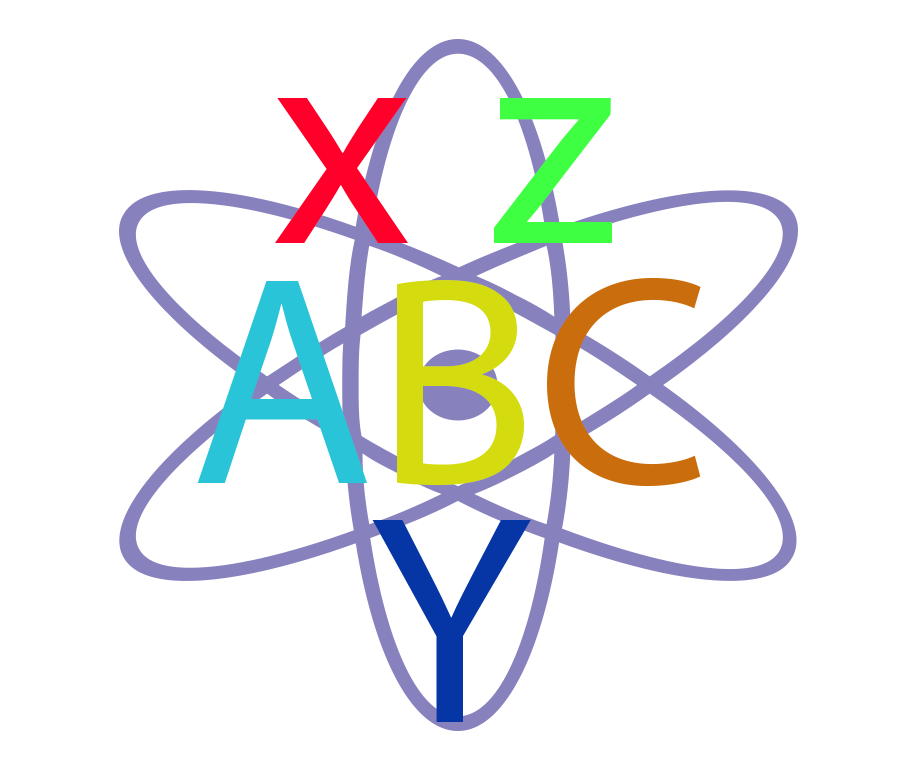
<style>
.page{position:relative;width:900px;height:768px;background:#ffffff}
.page>*{position:absolute;margin:0}
.t1{font:300px "MyriadPro-Regular";color:#ff002a}
.t2{font:300px "MyriadPro-Regular";color:#3eff41}
.t3{font:300px "MyriadPro-Regular";color:#29c4d8}
.t4{font:300px "MyriadPro-Regular";color:#d4db0e}
.t5{font:300px "MyriadPro-Regular";color:#ca6e0d}
.t6{font:300px "MyriadPro-Regular";color:#0636a5}
</style>
<div class="page">
<p class="t1" style="left:275px;top:98px;width:133px;height:145px">x</p>
<p class="t2" style="left:494px;top:98px;width:118px;height:145px">z</p>
<p class="t3" style="left:197px;top:277px;width:504px;height:210px">A<span class="t4">B</span><span class="t5">C</span></p>
<p class="t6" style="left:372px;top:520px;width:159px;height:202px">Y</p>
</div>
